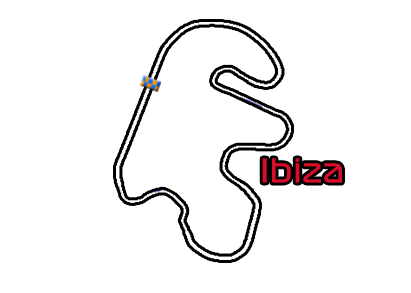
<style>
.page{position:relative;width:411px;height:293px;background:#ffffff}
.page>*{position:absolute;margin:0}
.t1{font:32px "Formula1-Display-Regular";color:#d50f2b}
</style>
<div class="page">
<p class="t1" style="left:262px;top:158px;width:80px;height:25px">Ibiza</p>
</div>
